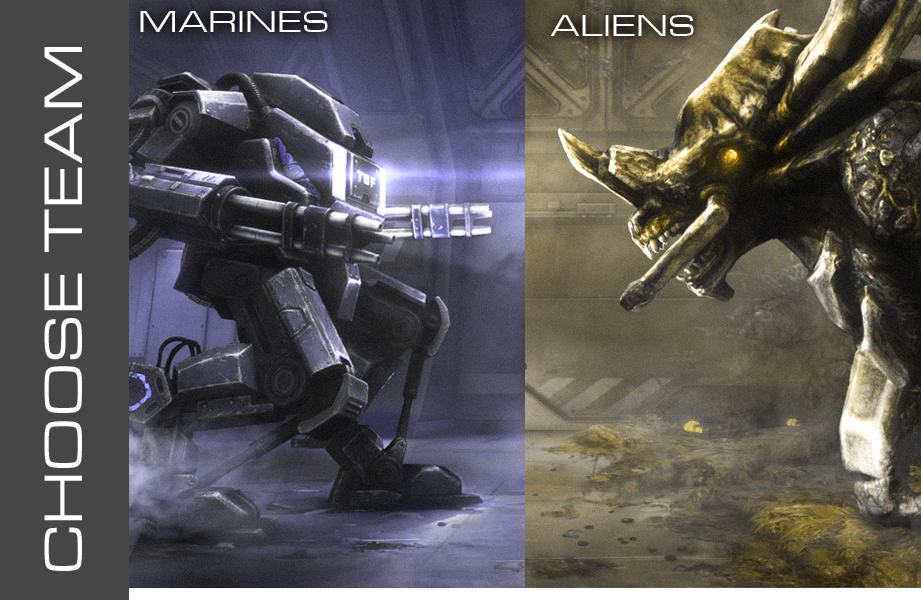
<style>
.page{position:relative;width:921px;height:600px}
.page>*{position:absolute;margin:0}
.t1{font:32px "MicrogrammaD-MediExte";letter-spacing:0.06em;color:#ffffff;text-transform:uppercase}
.t2{font:56.3px "MicrogrammaD-MediExte";letter-spacing:0.06em;color:#ffffff;text-transform:uppercase}
</style>
<div class="page">
<p class="t1" style="left:140px;top:11px;width:188px;height:21px">Marines</p>
<p class="t1" style="left:550px;top:15px;width:144px;height:21px">Aliens</p>
<p class="t2" style="left:44px;top:47px;width:38px;height:524px;rotate:-90deg">Choose team</p>
</div>
